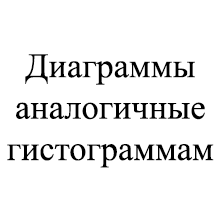
<style>
.page{position:relative;width:221px;height:221px;background:#ffffff}
.page>*{position:absolute;margin:0}
.t1{font:34.5px "TimesNewRomanPSMT";color:#000000}
</style>
<div class="page">
<p class="t1" style="left:7px;top:54px;width:207px;height:114px;text-align:center">Диаграммы<br>аналогичные<br>гистограммам</p>
</div>
